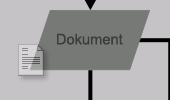
<style>
.page{position:relative;width:170px;height:100px;background:#c6c3c6}
.page>*{position:absolute;margin:0}
.t1{font:14.7px "ArialMT";color:#3b3c3b}
</style>
<div class="page">
<p class="t1" style="left:57px;top:33px;width:66px;height:12px">Dokument</p>
</div>
